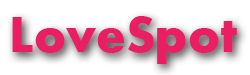
<style>
.page{position:relative;width:250px;height:75px;background:#ffffff}
.page>*{position:absolute;margin:0}
.t1{font:52px "Aharoni-Bold";color:#e91e63}
</style>
<div class="page">
<p class="t1" style="left:12px;top:16px;width:225px;height:48px">LoveSpot</p>
</div>
